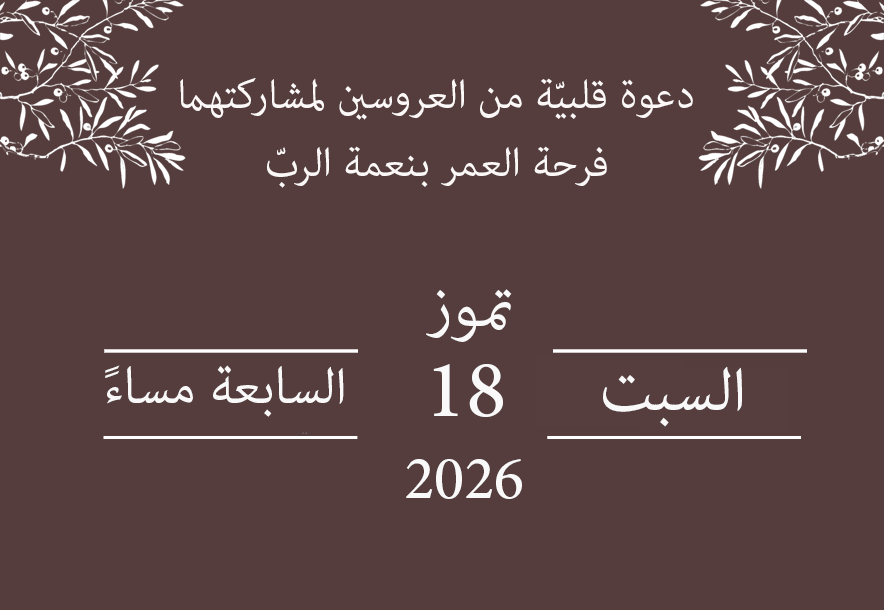
<style>
.page{position:relative;width:884px;height:610px;background:#553d3d}
.page>*{position:absolute;margin:0}
.t1{font:57px "AdobeArabic-Regular";color:#fcf8f8}
.t2{font:85.5px "AdobeArabic-Regular";color:#f9f9f9}
.t3{font:71.2px "AdobeArabic-Regular";color:#f9f9f9}
.t4{font:114px "AdobeArabic-Regular";color:#f9f9f9}
</style>
<div class="page">
<p class="t1" style="left:180px;top:78px;width:513px;height:110px;text-align:center">دعوة قلبيّة من العروسين لمشاركتهما<br>فرحة العمر بنعمة الربّ</p>
<p class="t2" style="left:426px;top:289px;width:86px;height:53px">تموز</p>
<p class="t3" style="left:105px;top:365px;width:239px;height:52px">السابعة مساءً</p>
<p class="t4" style="left:433px;top:364px;width:70px;height:53px">18</p>
<p class="t2" style="left:603px;top:366px;width:139px;height:61px">السبت</p>
<p class="t2" style="left:406px;top:459px;width:116px;height:40px">2026</p>
</div>
